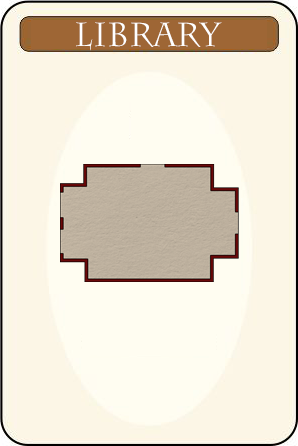
<style>
.page{position:relative;width:298px;height:446px;background:#fcf6e6}
.page>*{position:absolute;margin:0}
.t1{font:33.3px "CharlemagneStd-Regular";color:#ffffff}
</style>
<div class="page">
<p class="t1" style="left:76px;top:22px;width:146px;height:29px">Library</p>
</div>
